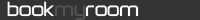
<style>
.page{position:relative;width:200px;height:20px;background:#333333}
.page>*{position:absolute;margin:0}
.t1{font:24px "FormationSansRegular-Regular";color:#f9fafa}
.t2{font:24px "FormationSansRegular-Regular";color:#515253}
</style>
<div class="page">
<p class="t1" style="left:7px;top:1px;width:132px;height:19px">book<span class="t2">my</span>room</p>
</div>
